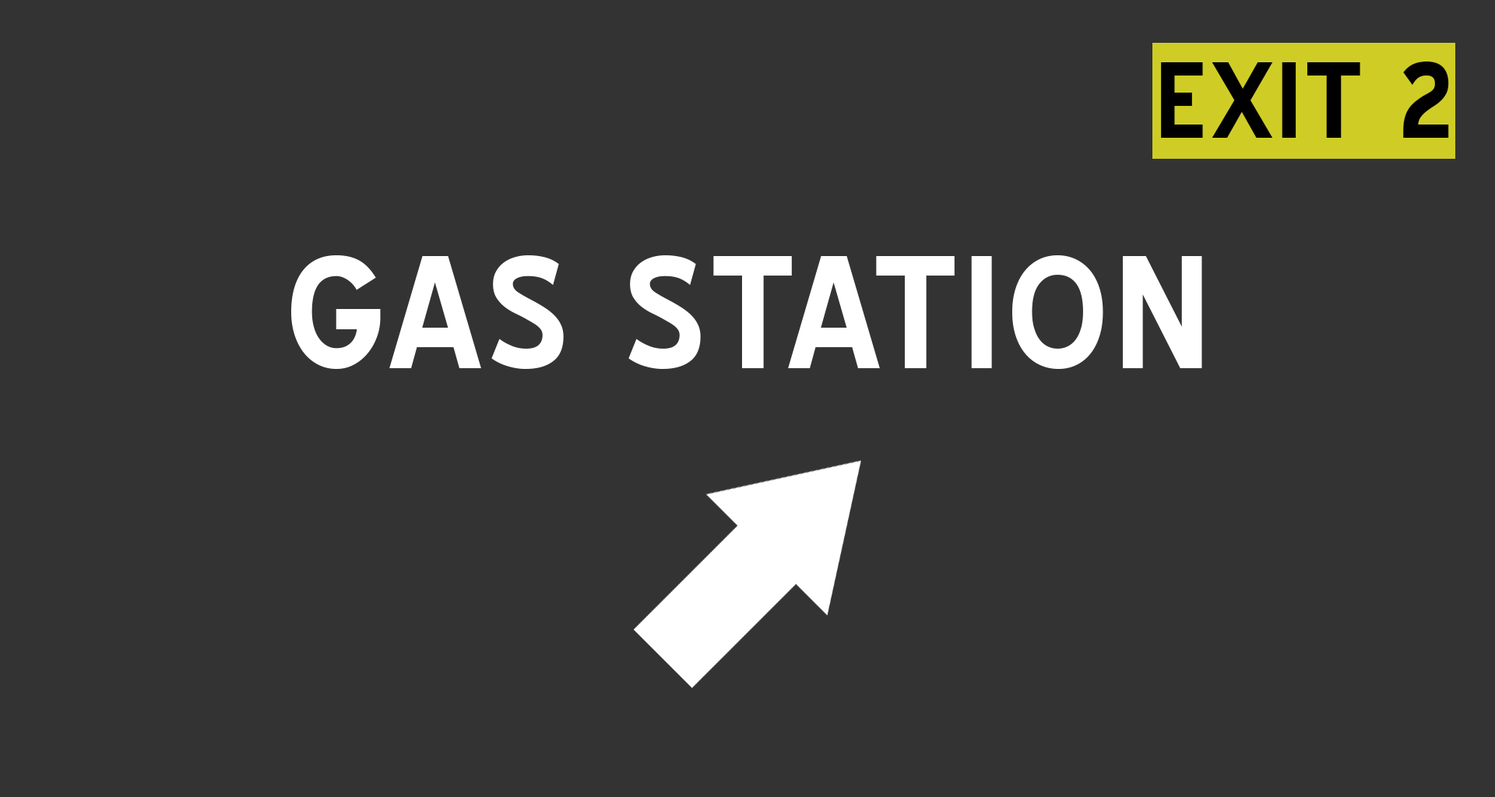
<style>
.page{position:relative;width:1495px;height:797px;background:#333333}
.page>*{position:absolute;margin:0}
.t1{font:105.1px "BlueHighway-Bold";letter-spacing:0.02em;color:#000000}
.t2{font:155.8px "BlueHighway-Bold";letter-spacing:0.02em;color:#ffffff}
</style>
<div class="page">
<p class="t1" style="left:1161px;top:62px;width:288px;height:76px">EXIT 2</p>
<p class="t2" style="left:291px;top:255px;width:911px;height:114px">GAS STATION</p>
</div>
